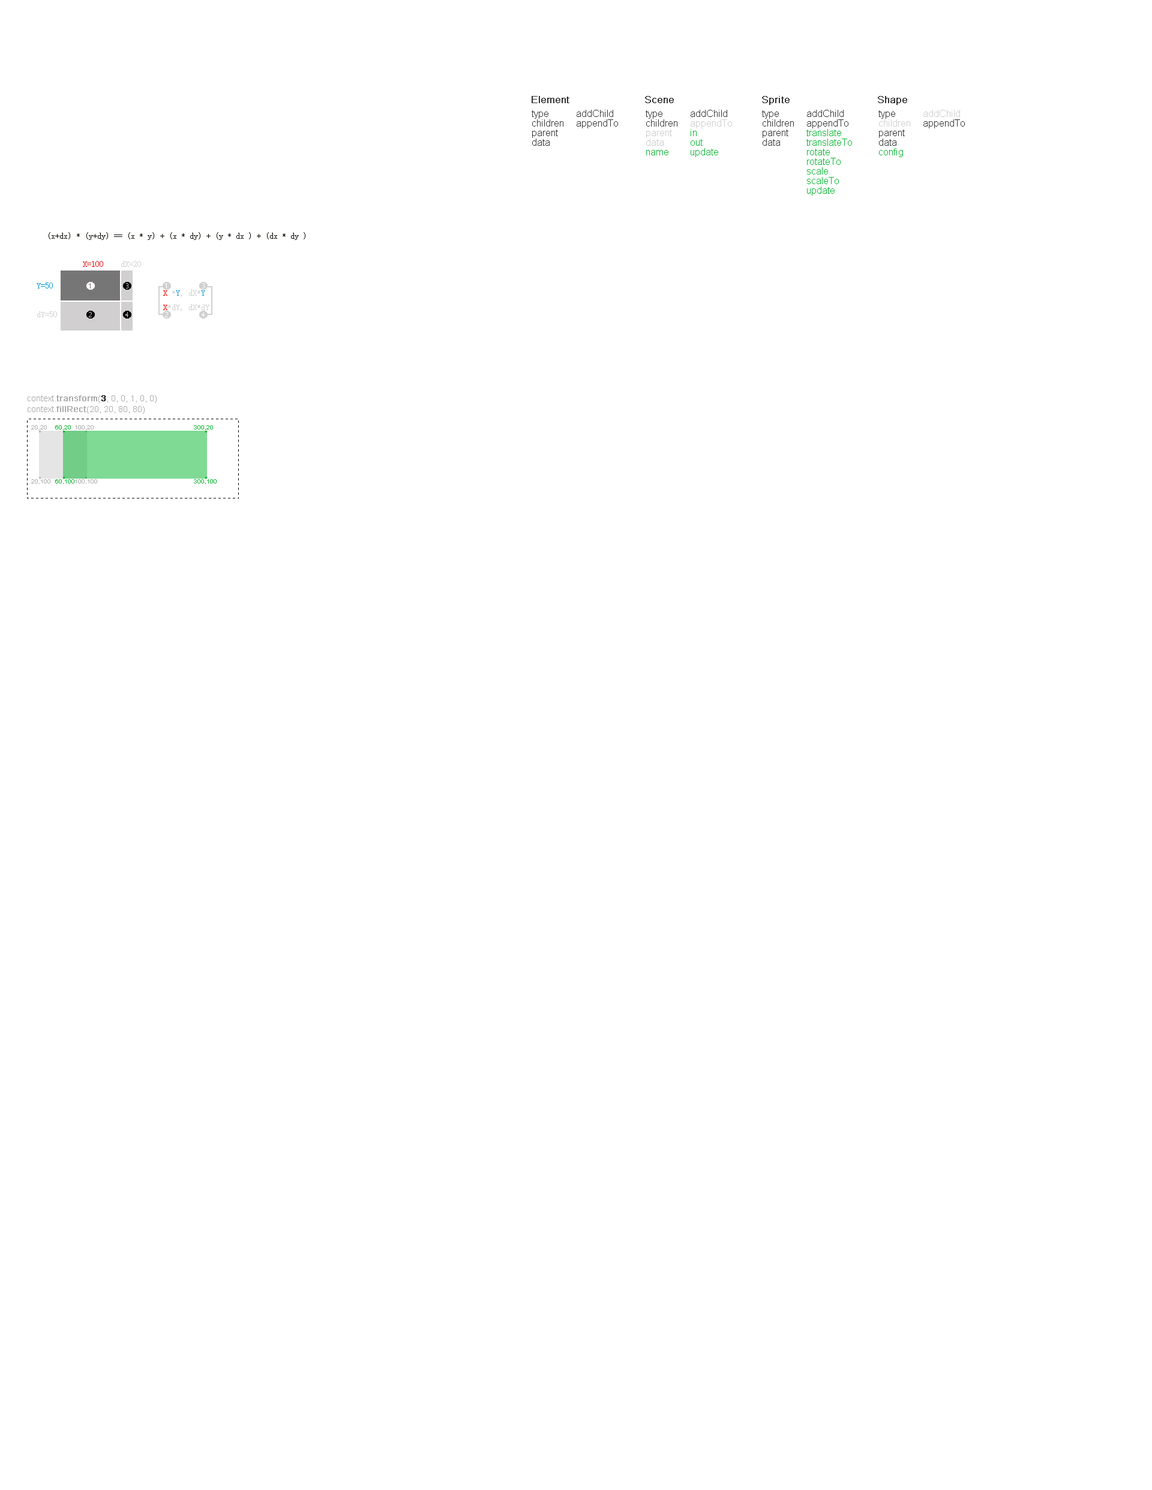
<style>
.page{position:relative;width:1152px;height:1490px;background:#ffffff}
.page>*{position:absolute;margin:0}
.t1{font:9.6px "ArialMT";color:#333333;font-weight:bold}
.t2{font:9.6px/9.6px "ArialMT";color:#333333}
.t3{font:9.6px/9.6px "ArialMT";color:#cccccc}
.t4{font:9.6px/9.6px "ArialMT";color:#04b632}
.t5{font:8.4px "SimSun";color:#050500}
.t6{font:7.2px/7.2px "SegoeUI";color:#000000}
.t7{font:7.2px/7.2px "SegoeUI";color:#fefafa}
.t8{font:7.2px/7.2px "SegoeUI";color:#d1cfcf}
.t9{font:8.4px/7.2px "SimSun";color:#d1cfcf}
.t10{font:8.4px/7.2px "SimSun";color:#e90303}
.t11{font:8.4px/7.2px "SimSun";color:#0398d6}
.t12{font:8.4px/10.8px "ArialMT";color:#aaaaaa}
.t13{font:8.4px/10.8px "ArialMT";color:#aaaaaa;font-weight:bold}
.t14{font:8.4px/10.8px "ArialMT";color:#000000;font-weight:bold}
.t15{font:6px "ArialMT";color:#aaaaaa}
.t16{font:6px "ArialMT";color:#00b62a}
</style>
<div class="page">
<p class="t1" style="left:532px;top:96px;width:375px;height:9px">Element                         Scene                             Sprite                             Shape</p>
<p class="t2" style="left:532px;top:110px;width:31px;height:36px">type<br>children<br>parent<br>data</p>
<p class="t2" style="left:577px;top:110px;width:41px;height:18px">addChild<br>appendTo</p>
<p class="t2" style="left:646px;top:110px;width:31px;height:45px">type<br>children<br><span class="t3">parent<br>data<br></span><span class="t4">name</span></p>
<p class="t4" style="left:691px;top:110px;width:41px;height:47px"><span class="t2">addChild<br></span><span class="t3">appendTo<br></span>in<br>out<br>update</p>
<p class="t2" style="left:762px;top:110px;width:32px;height:36px">type<br>children<br>parent<br>data</p>
<p class="t4" style="left:806px;top:110px;width:46px;height:86px"><span class="t2">addChild<br>appendTo<br></span>translate<br>translateTo<br>rotate<br>rotateTo<br>scale<br>scaleTo<br>update</p>
<p class="t2" style="left:878px;top:110px;width:32px;height:47px">type<br><span class="t3">children<br></span>parent<br>data<br><span class="t4">config</span></p>
<p class="t3" style="left:923px;top:110px;width:42px;height:18px">addChild<br><span class="t2">appendTo</span></p>
<p class="t5" style="left:49px;top:232px;width:256px;height:8px">(x+dx) * (y+dy) == (x * y) + (x * dy) + (y * dx ) + (dx * dy )</p>
<p class="t6" style="left:86px;top:282px;width:45px;height:37px"><span class="t7">❶</span>               ❸<br><br><br><br>❷               ❹</p>
<p class="t8" style="left:163px;top:282px;width:45px;height:37px">❶               ❸<br><br><br><br>❷               ❹</p>
<p class="t9" style="left:163px;top:290px;width:46px;height:21px"><span class="t10">X </span>*<span class="t11">Y</span>, dX*<span class="t11">Y<br><br></span><span class="t10">X</span>*dY, dX*dY</p>
<p class="t12" style="left:28px;top:395px;width:129px;height:19px">context.<span class="t13">transform</span>(<span class="t14">3</span>, 0, 0, 1, 0, 0)<br>context.<span class="t13">fillRect</span>(20, 20, 80, 80)</p>
<p class="t15" style="left:31px;top:425px;width:63px;height:5px">20,20               100,20</p>
<p class="t16" style="left:55px;top:425px;width:158px;height:5px">60,20                                                                    300,20</p>
<p class="t15" style="left:31px;top:479px;width:66px;height:5px">20,100             100,100</p>
<p class="t16" style="left:55px;top:479px;width:162px;height:5px">60,100                                                                  300,100</p>
</div>
